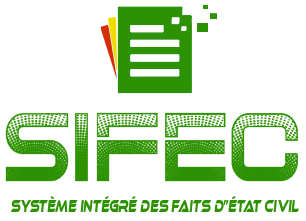
<style>
.page{position:relative;width:306px;height:221px;background:#ffffff}
.page>*{position:absolute;margin:0}
.t1{font:101.7px "Slight-Regular";color:#2d9201;scale:0.88 1}
.t2{font:18px "EthnocentricRg-Italic";color:#2d9201;scale:0.54 1}
</style>
<div class="page">
<p class="t1" style="left:5px;top:112px;width:293px;height:70px">SIFEC</p>
<p class="t2" style="left:10px;top:196px;width:289px;height:16px">système intégré des faits d”état civil</p>
</div>
